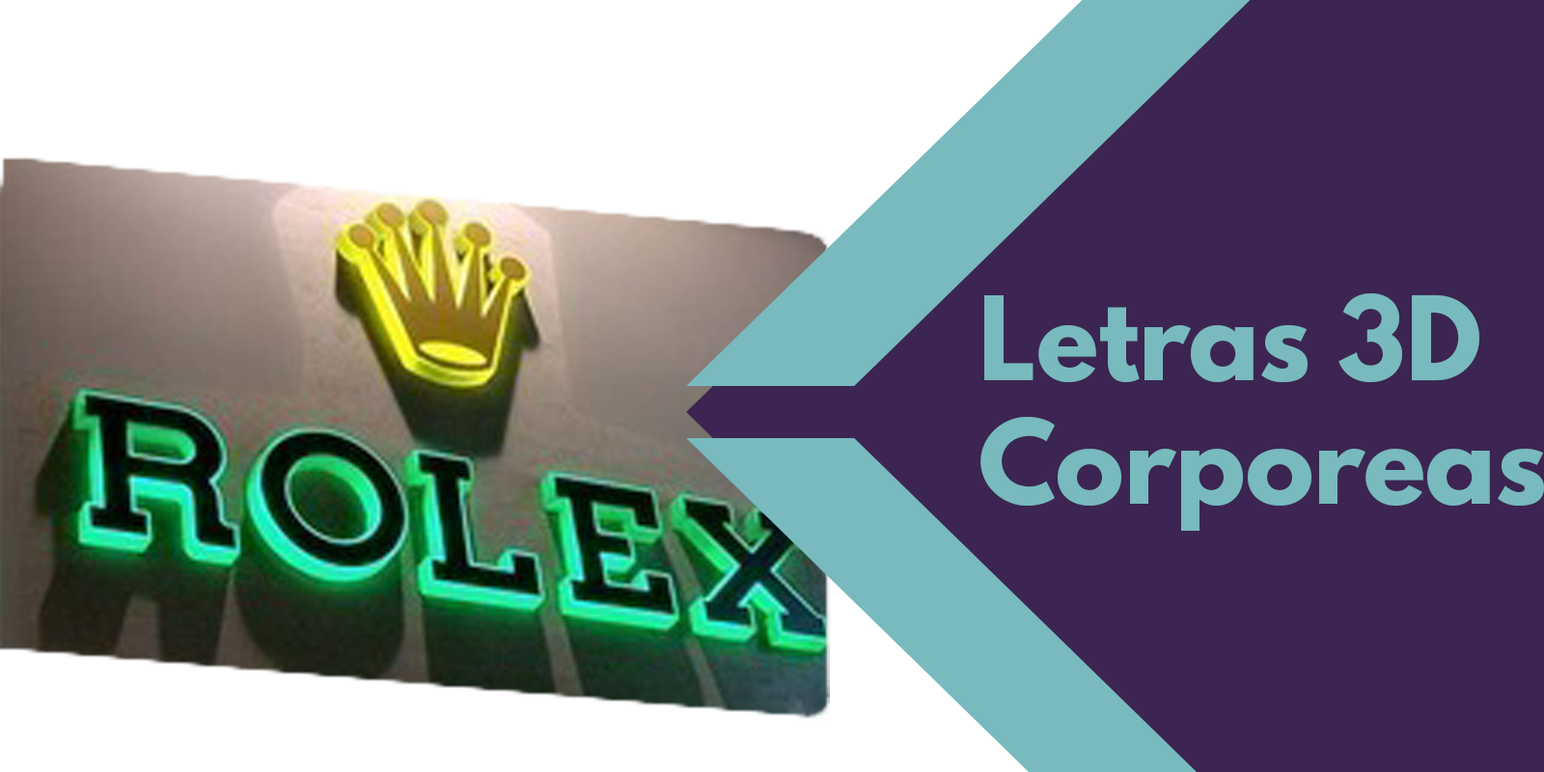
<style>
.page{position:relative;width:1544px;height:772px;background:#3c2552}
.page>*{position:absolute;margin:0}
.t1{font:103px "LeagueSpartan-Bold";color:#78babd}
</style>
<div class="page">
<p class="t1" style="left:981px;top:293px;width:563px;height:238px">Letras 3D<br>Corporeas</p>
</div>
